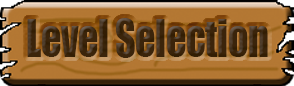
<style>
.page{position:relative;width:294px;height:86px}
.page>*{position:absolute;margin:0}
.t1{font:48px "Impact";letter-spacing:-0.01em;scale:0.83 1}
</style>
<div class="page">
<p class="t1" style="left:27px;top:18px;width:241px;height:40px">Level Selection</p>
</div>
